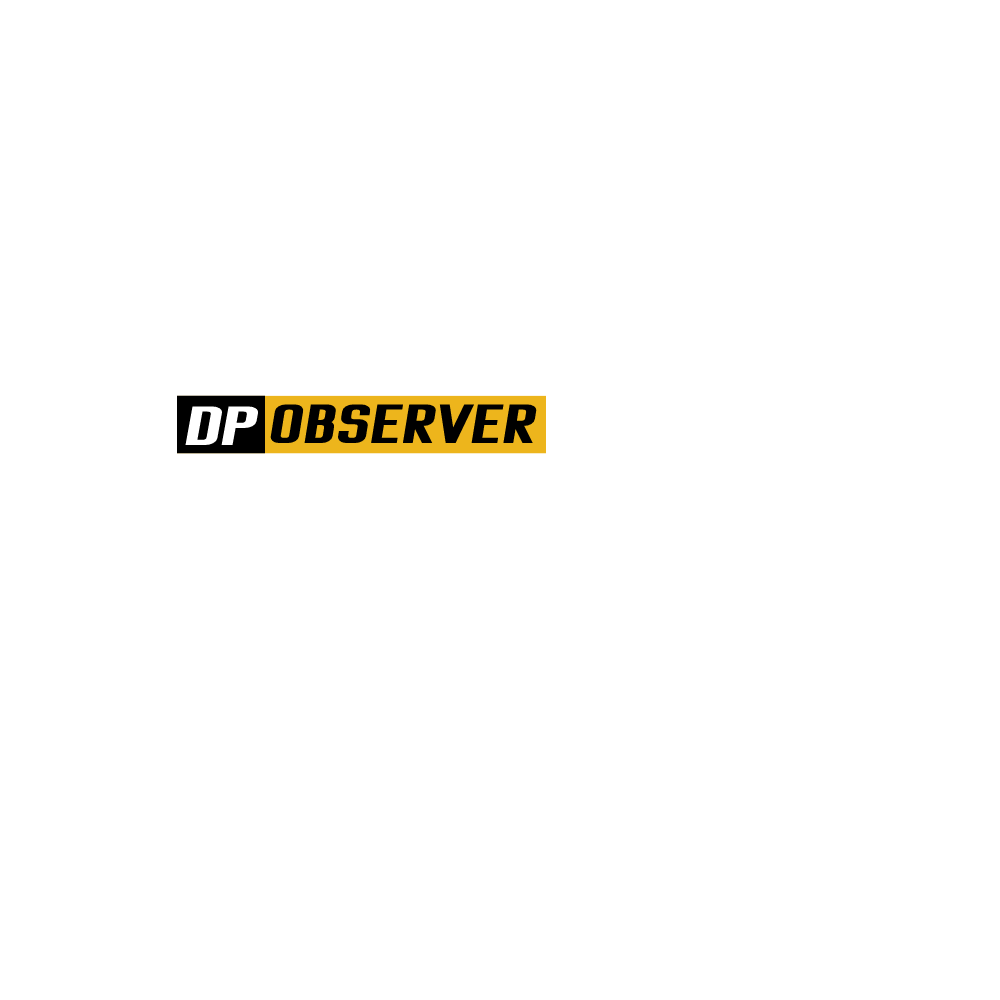
<style>
.page{position:relative;width:1000px;height:1000px;background:#ffffff}
.page>*{position:absolute;margin:0}
.t1{font:80px "Dhurjati";color:#ffffff;font-weight:bold;font-style:italic}
.t2{font:80px "Dhurjati";color:#000000;font-weight:bold;font-style:italic;scale:0.9 1}
</style>
<div class="page">
<p class="t1" style="left:185px;top:406px;width:74px;height:39px">DP</p>
<p class="t2" style="left:270px;top:404px;width:267px;height:39px">OBSERVER</p>
</div>
